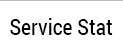
<style>
.page{position:relative;width:123px;height:50px;background:#ffffff}
.page>*{position:absolute;margin:0}
.t1{font:22px "RobotoCondensed-Regular";color:#000000}
</style>
<div class="page">
<p class="t1" style="left:10px;top:18px;width:103px;height:17px">Service Stat</p>
</div>
